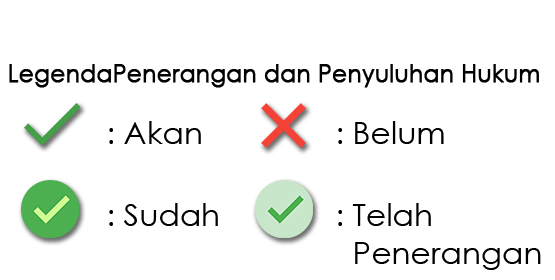
<style>
.page{position:relative;width:555px;height:280px;background:#ffffff}
.page>*{position:absolute;margin:0}
.t1{font:25.3px "CenturyGothic";color:#000000;font-weight:bold;scale:0.9 1}
.t2{font:31.3px "CenturyGothic";color:#000000}
</style>
<div class="page">
<p class="t1" style="left:9px;top:64px;width:530px;height:24px">LegendaPenerangan dan Penyuluhan Hukum</p>
<p class="t2" style="left:109px;top:121px;width:92px;height:23px">: Akan</p>
<p class="t2" style="left:338px;top:121px;width:106px;height:23px">: Belum</p>
<p class="t2" style="left:109px;top:203px;width:109px;height:23px">: Sudah</p>
<p class="t2" style="left:338px;top:203px;width:203px;height:67px;text-align:justify">: Telah<br>  Penerangan</p>
</div>
